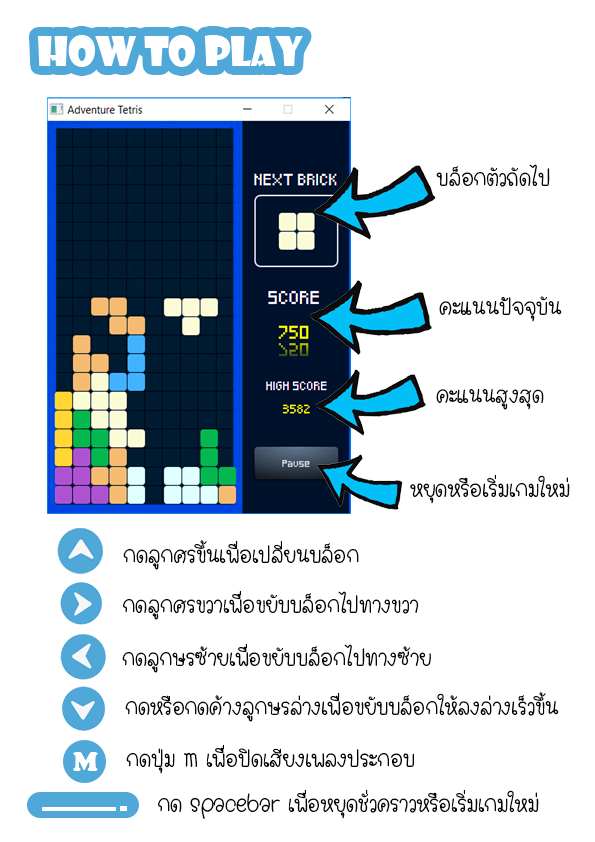
<style>
.page{position:relative;width:595px;height:842px;background:#ffffff}
.page>*{position:absolute;margin:0}
.t1{font:24px "SanamDeklenchaya";color:#050505}
.t2{font:24px "SanamDeklenchaya";color:#000000}
.t3{font:27.9px "CooperBlack";color:#ffffff}
</style>
<div class="page">
<p class="t1" style="left:436px;top:164px;width:114px;height:23px">บล็อกตัวถัดไป</p>
<p class="t1" style="left:439px;top:296px;width:123px;height:26px">คะแนนปัจจุบัน</p>
<p class="t1" style="left:436px;top:389px;width:108px;height:21px">คะแนนสูงสุด</p>
<p class="t1" style="left:410px;top:474px;width:160px;height:30px">หยุดหรือเริ่มเกมใหม่</p>
<p class="t1" style="left:123px;top:540px;width:236px;height:30px">กดลูกศรขึ้นเพื่อเปลี่ยนบล็อก</p>
<p class="t1" style="left:123px;top:590px;width:296px;height:30px">กดลูกศรขวาเพื่อขยับบล็อกไปทางขวา</p>
<p class="t1" style="left:122px;top:643px;width:309px;height:30px">กดลูกษรซ้ายเพื่อขยับบล็อกไปทางซ้าย</p>
<p class="t1" style="left:125px;top:692px;width:434px;height:30px">กดหรือกดค้างลูกษรล่างเพื่อขยับบล็อกให้ลงล่างเร็วขึ้น</p>
<p class="t2" style="left:126px;top:744px;width:288px;height:30px">กดปุ่ม m เพื่อปิดเสียงเพลงประกอบ</p>
<p class="t3" style="left:73px;top:752px;width:25px;height:19px">M</p>
<p class="t1" style="left:158px;top:789px;width:381px;height:30px">กด spacebar เพื่อหยุดชั่วคราวหรือเริ่มเกมใหม่</p>
</div>
